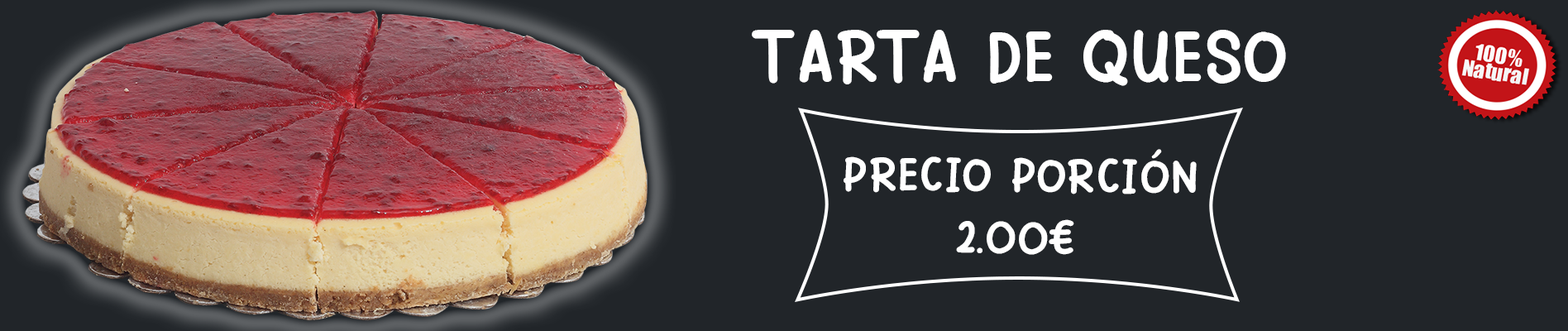
<style>
.page{position:relative;width:1568px;height:331px;background:#212529}
.page>*{position:absolute;margin:0}
.t1{font:79.4px "PinkChicken-Regular";color:#ffffff}
.t2{font:51px "PinkChicken-Regular";color:#ffffff;scale:1.04 1}
</style>
<div class="page">
<p class="t1" style="left:752px;top:30px;width:534px;height:56px">TARTA DE QUESO</p>
<p class="t2" style="left:844px;top:149px;width:353px;height:106px;text-align:center;rotate:1deg">PRECIO PORCIÓN<br>2.00€</p>
</div>
